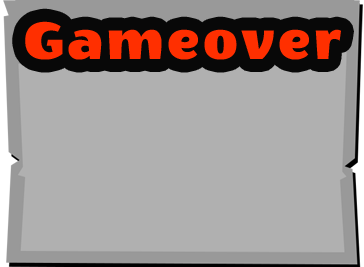
<style>
.page{position:relative;width:364px;height:267px;background:#b0b0b0}
.page>*{position:absolute;margin:0}
.t1{font:60px "WendyOne-Regular";letter-spacing:0.06em;color:#ff2f00}
</style>
<div class="page">
<p class="t1" style="left:25px;top:21px;width:316px;height:39px">Gameover</p>
</div>
